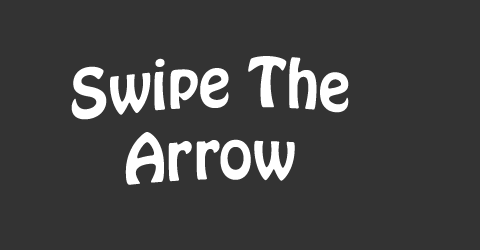
<style>
.page{position:relative;width:480px;height:250px;background:#333333}
.page>*{position:absolute;margin:0}
.t1{font:60px "HoboStd";color:#ffffff}
</style>
<div class="page">
<p class="t1" style="left:71px;top:56px;width:278px;height:129px;text-align:center">Swipe The Arrow</p>
</div>
